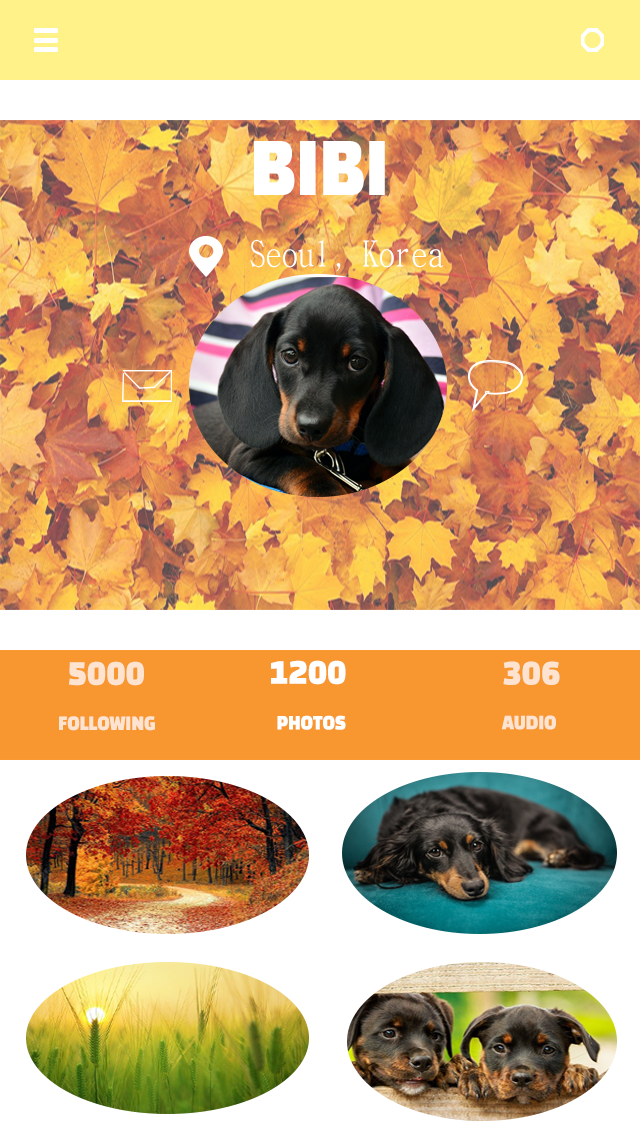
<style>
.page{position:relative;width:640px;height:1136px;background:#ffffff}
.page>*{position:absolute;margin:0}
.t1{font:72px "BlackHanSans-Regular";color:#ffffff;scale:0.9 1}
.t2{font:36px "BatangChe";color:#ffffff;scale:0.9 1}
.t3{font:36px "BlackHanSans-Regular";color:#fde3d0;scale:0.9 1}
.t4{font:36px "BlackHanSans-Regular";color:#ffffff;scale:0.9 1}
.t5{font:18px "BlackHanSans-Regular";color:#fde3d0;scale:0.9 1}
.t6{font:18px "BlackHanSans-Regular";color:#ffffff;scale:0.9 1}
</style>
<div class="page">
<p class="t1" style="left:254px;top:141px;width:131px;height:54px">BIBI</p>
<p class="t2" style="left:250px;top:240px;width:194px;height:32px">Seoul, Korea</p>
<p class="t3" style="left:68px;top:661px;width:76px;height:25px">5000</p>
<p class="t4" style="left:271px;top:660px;width:75px;height:25px">1200</p>
<p class="t3" style="left:503px;top:661px;width:57px;height:24px">306</p>
<p class="t5" style="left:59px;top:716px;width:96px;height:15px">FOLLOWING</p>
<p class="t6" style="left:277px;top:715px;width:69px;height:15px">PHOTOS</p>
<p class="t5" style="left:501px;top:715px;width:55px;height:15px">AUDIO</p>
</div>
